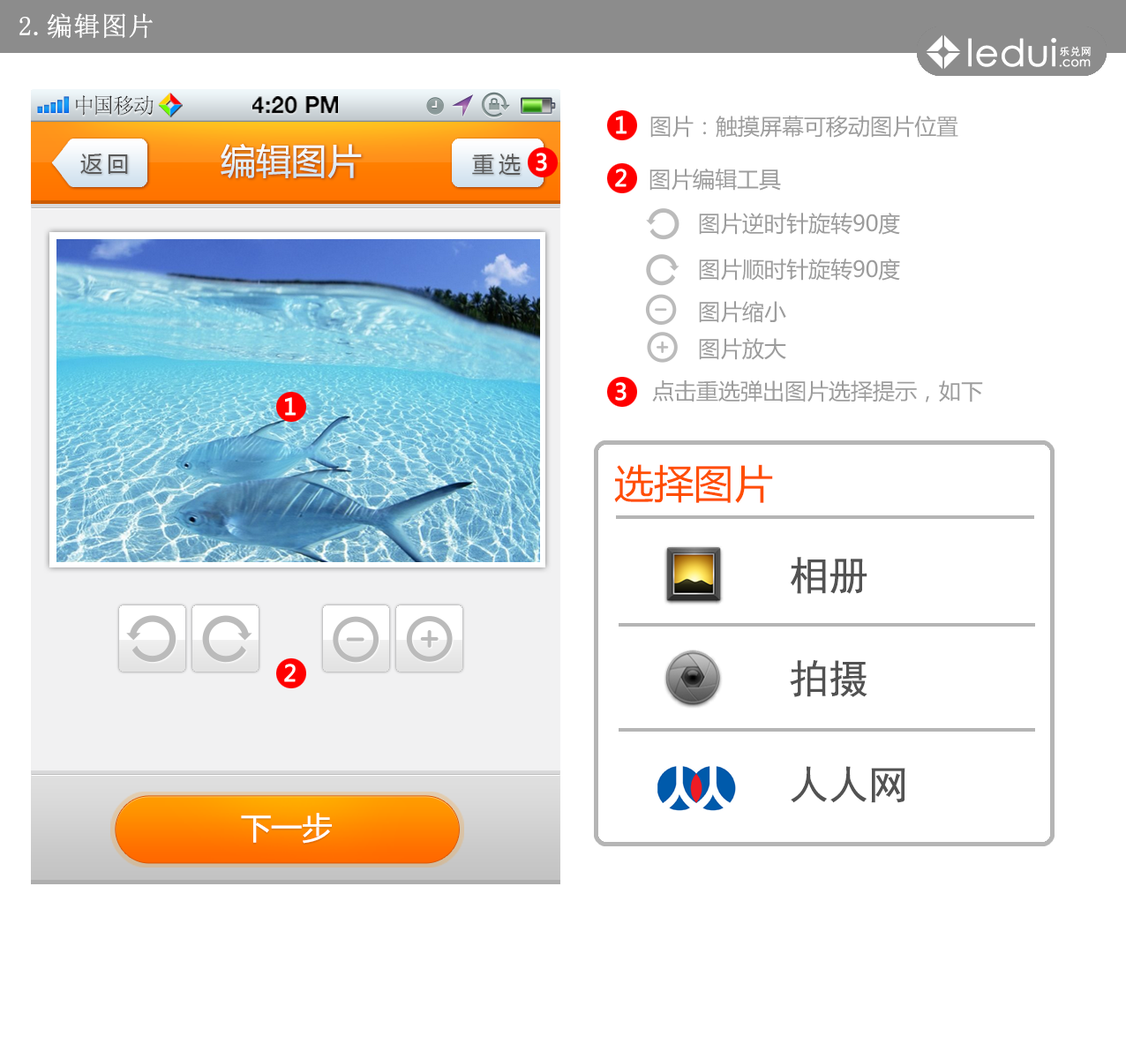
<style>
.page{position:relative;width:1126px;height:1059px;background:#ffffff}
.page>*{position:absolute;margin:0}
.t1{font:26.5px "SimSun";color:#ffffff;font-weight:bold}
.t2{font:21.5px "SimSun";color:#414141}
.t3{font:23.1px "HelveticaNeue-Bold";color:#000000;text-transform:uppercase}
.t4{font:22.1px "MicrosoftYaHei";color:#9c9c9c}
.t5{font:35.3px "MicrosoftYaHei";color:#e8f0f7}
.t6{font:22.1px "MicrosoftYaHei";letter-spacing:0.2em;color:#5b5b5b}
.t7{font:39.7px "MicrosoftYaHei";color:#ff4e00}
.t8{font:39.7px "SimHei";color:#525252}
.t9{font:30.6px "MicrosoftYaHei";color:#ffffff}
</style>
<div class="page">
<p class="t1" style="left:19px;top:13px;width:134px;height:26px">2.编辑图片</p>
<p class="t2" style="left:76px;top:95px;width:78px;height:21px">中国移动</p>
<p class="t3" style="left:252px;top:96px;width:86px;height:18px">4:20 PM</p>
<p class="t4" style="left:650px;top:116px;width:308px;height:22px">图片：触摸屏幕可移动图片位置</p>
<p class="t5" style="left:221px;top:144px;width:141px;height:34px">编辑图片</p>
<p class="t6" style="left:80px;top:154px;width:48px;height:20px">返回</p>
<p class="t6" style="left:472px;top:154px;width:49px;height:21px">重选</p>
<p class="t4" style="left:649px;top:169px;width:132px;height:22px">图片编辑工具</p>
<p class="t4" style="left:699px;top:213px;width:201px;height:22px">图片逆时针旋转90度</p>
<p class="t4" style="left:699px;top:259px;width:201px;height:22px">图片顺时针旋转90度</p>
<p class="t4" style="left:699px;top:301px;width:87px;height:22px">图片缩小</p>
<p class="t4" style="left:699px;top:338px;width:87px;height:22px">图片放大</p>
<p class="t4" style="left:652px;top:380px;width:331px;height:22px">点击重选弹出图片选择提示，如下</p>
<p class="t7" style="left:614px;top:464px;width:159px;height:39px">选择图片</p>
<p class="t8" style="left:791px;top:557px;width:76px;height:37px">相册</p>
<p class="t8" style="left:790px;top:660px;width:77px;height:37px">拍摄</p>
<p class="t8" style="left:791px;top:766px;width:114px;height:37px">人人网</p>
<p class="t9" style="left:241px;top:813px;width:91px;height:31px">下一步</p>
</div>
